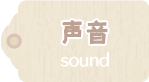
<style>
.page{position:relative;width:149px;height:82px}
.page>*{position:absolute;margin:0}
.t1{font:15.6px "shetumodengxiaofangti";color:#bda193;font-weight:bold;scale:0.94 1}
</style>
<div class="page">
<p class="t1" style="left:62px;top:20px;width:46px;height:25px">声音</p>
</div>
